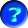
<style>
.page{position:relative;width:28px;height:28px;background:#003afe}
.page>*{position:absolute;margin:0}
.t1{font:19.7px "Verdana-Bold";font-weight:bold;scale:1.15 1}
</style>
<div class="page">
<p class="t1" style="left:8px;top:6px;width:13px;height:16px">?</p>
</div>
